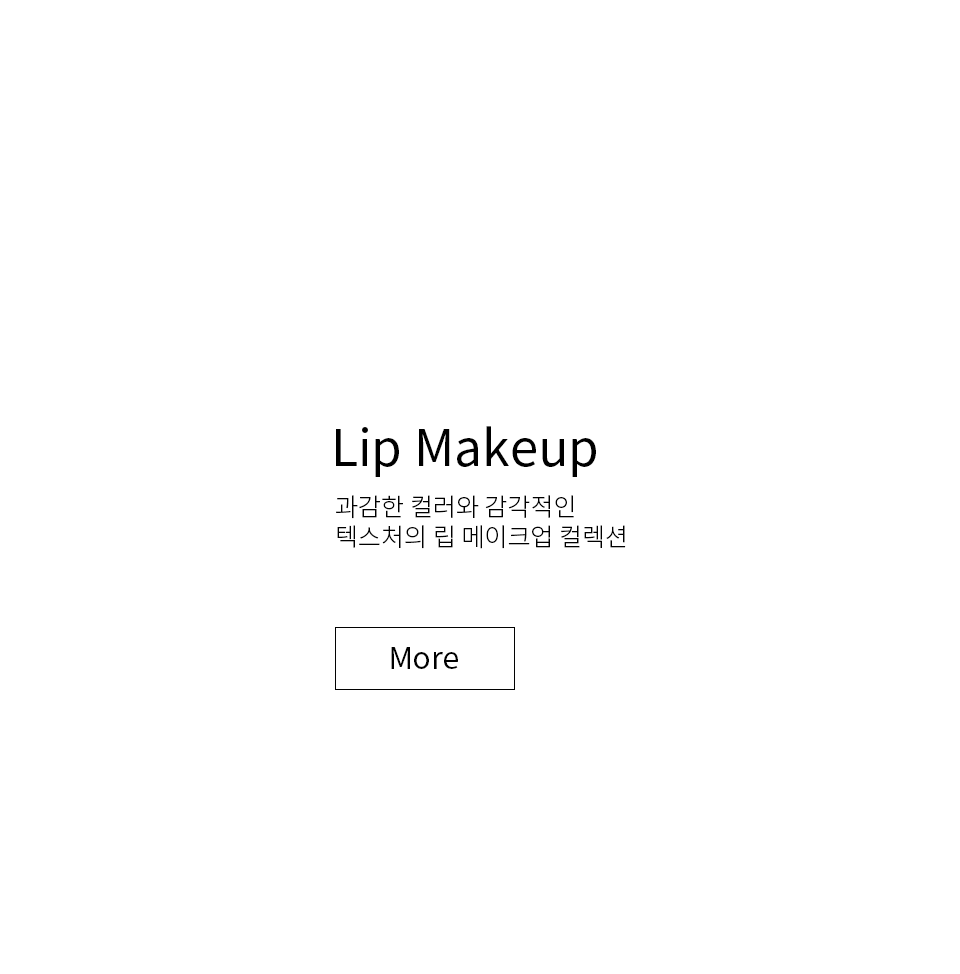
<style>
.page{position:relative;width:960px;height:974px;background:#ffffff}
.page>*{position:absolute;margin:0}
.t1{font:50px "NotoSansKR-Regular";color:#000000}
.t2{font:25px "NotoSansKR-Light";color:#000000}
.t3{font:30px "NotoSansKR-Regular";color:#000000}
</style>
<div class="page">
<p class="t1" style="left:336px;top:426px;width:260px;height:51px">Lip Makeup</p>
<p class="t2" style="left:336px;top:495px;width:290px;height:54px">과감한 컬러와 감각적인 <br>텍스처의 립 메이크업 컬렉션</p>
<p class="t3" style="left:391px;top:647px;width:67px;height:22px">More</p>
</div>
